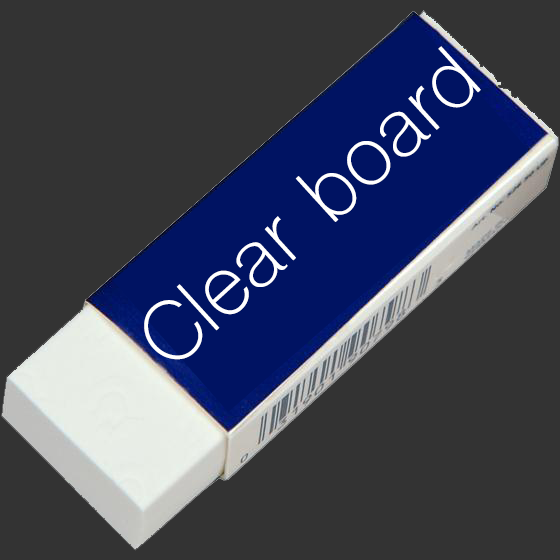
<style>
.page{position:relative;width:560px;height:560px;background:#333333}
.page>*{position:absolute;margin:0}
.t1{font:80px "ShreeDev0714";color:#ffffff}
</style>
<div class="page">
<p class="t1" style="left:144px;top:46px;width:337px;height:314px;rotate:-42deg">Clear board</p>
</div>
